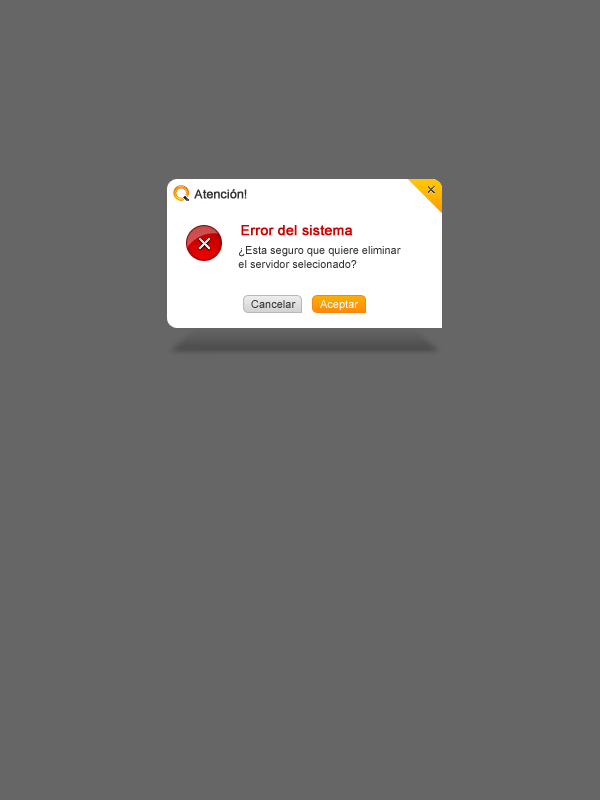
<style>
.page{position:relative;width:600px;height:800px;background:#666666}
.page>*{position:absolute;margin:0}
.t1{font:12px "ArialMT";color:#333333;font-weight:bold}
.t2{font:14px "ArialMT";color:#cc0101;font-weight:bold}
.t3{font:11px "ArialMT";color:#333333}
.t4{font:11px "ArialMT";color:#ffffff}
</style>
<div class="page">
<p class="t1" style="left:194px;top:189px;width:53px;height:10px">Atención!</p>
<p class="t2" style="left:241px;top:225px;width:112px;height:11px">Error del sistema</p>
<p class="t3" style="left:238px;top:246px;width:163px;height:22px">¿Esta seguro que quiere eliminar<br>el servidor selecionado?</p>
<p class="t3" style="left:251px;top:300px;width:45px;height:8px">Cancelar</p>
<p class="t4" style="left:320px;top:300px;width:39px;height:11px">Aceptar</p>
</div>
